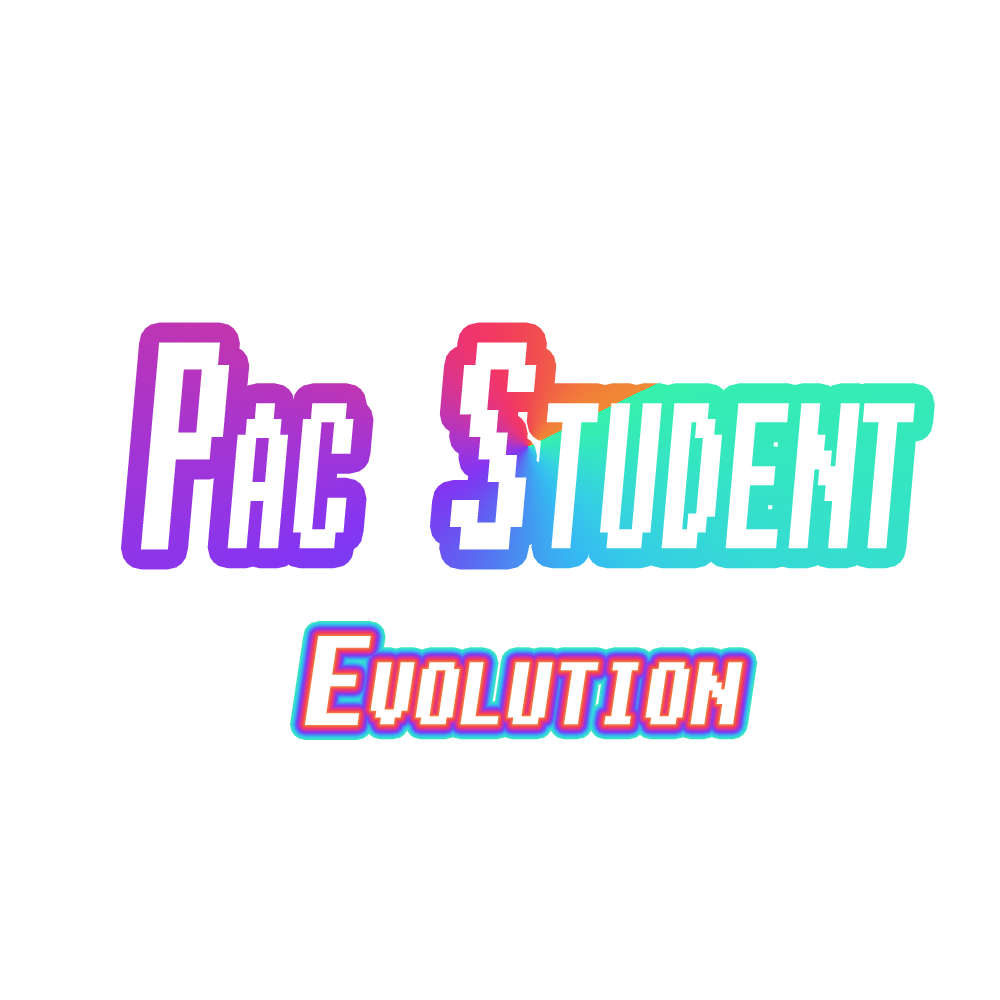
<style>
.page{position:relative;width:1000px;height:1000px;background:#ffffff}
.page>*{position:absolute;margin:0}
.t1{font:288px "Fixedsys";color:#ffffff;font-variant:small-caps;font-weight:bold;font-style:italic;scale:0.5 1}
.t2{font:123.6px "Fixedsys";color:#ffffff;font-variant:small-caps;font-weight:bold;font-style:italic;scale:0.85 1}
</style>
<div class="page">
<p class="t1" style="left:141px;top:342px;width:774px;height:208px">Pac Student</p>
<p class="t2" style="left:305px;top:636px;width:438px;height:89px">Evolution</p>
</div>
